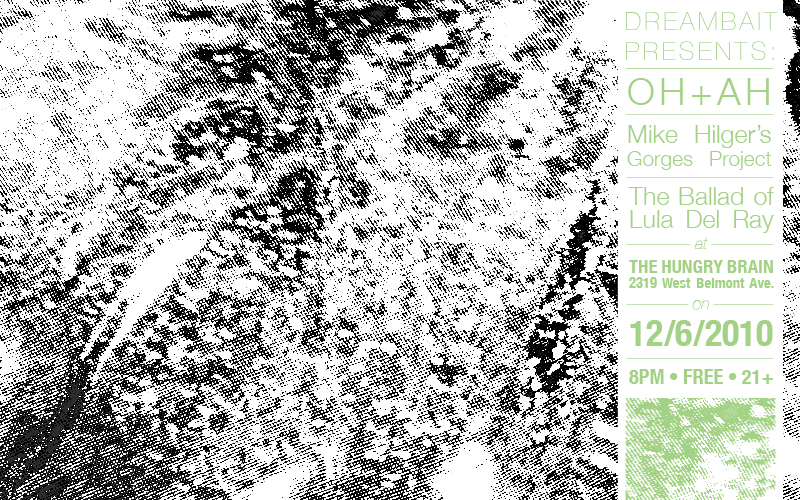
<style>
.page{position:relative;width:800px;height:500px;background:#ffffff}
.page>*{position:absolute;margin:0}
.t1{font:25px "HelveticaNeue-UltraLight";color:#a3d286}
.t2{font:37.5px "HelveticaNeue-Light";color:#a3d286}
.t3{font:20.8px/22.9px "HelveticaNeue-Light";color:#a3d286}
.t4{font:25px/22.9px "HelveticaNeue-Light";color:#a3d286}
.t5{font:16.7px "HelveticaNeue-UltraLightItalic";color:#a3d286}
.t6{font:18.8px "HelveticaNeue-CondensedBold";color:#a3d286}
.t7{font:14.6px "HelveticaNeue-CondensedBold";color:#a3d286}
.t8{font:35.8px "HelveticaNeue-CondensedBold";color:#a3d286}
.t9{font:20.4px "HelveticaNeue-CondensedBold";color:#a3d286}
</style>
<div class="page">
<p class="t1" style="left:626px;top:12px;width:152px;height:48px;text-align:justify">DREAMBAIT<br>PRESENTS:</p>
<p class="t2" style="left:628px;top:78px;width:141px;height:27px">OH+AH</p>
<p class="t3" style="left:627px;top:125px;width:145px;height:45px;text-align:justify"><span class="t4">Mike Hilger’s </span>Gorges Project</p>
<p class="t4" style="left:628px;top:187px;width:146px;height:46px;text-align:justify">The Ballad of Lula Del Ray</p>
<p class="t5" style="left:694px;top:238px;width:14px;height:11px">at</p>
<p class="t6" style="left:629px;top:260px;width:144px;height:13px">THE HUNGRY BRAIN</p>
<p class="t7" style="left:629px;top:277px;width:145px;height:11px">2319 West Belmont Ave.</p>
<p class="t5" style="left:692px;top:300px;width:18px;height:10px">on</p>
<p class="t8" style="left:630px;top:320px;width:143px;height:26px">12/6/2010</p>
<p class="t9" style="left:629px;top:369px;width:144px;height:15px">8PM • FREE • 21+</p>
</div>
